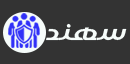
<style>
.page{position:relative;width:130px;height:64px;background:#333333}
.page>*{position:absolute;margin:0}
.t1{font:28px "Mj_Dalal";color:#f6fcfa}
</style>
<div class="page">
<p class="t1" style="left:46px;top:23px;width:81px;height:18px">سهند</p>
</div>
